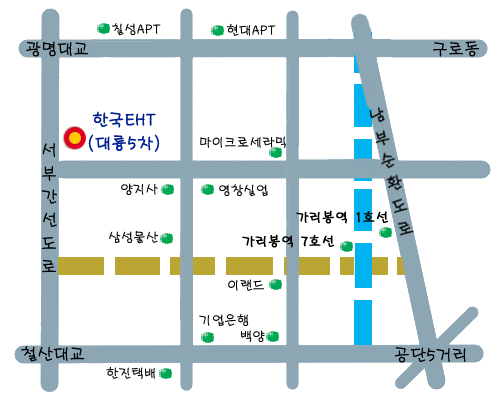
<style>
.page{position:relative;width:500px;height:400px;background:#ffffff}
.page>*{position:absolute;margin:0}
.t1{font:14px "MDGaesung";color:#000000;scale:0.95 1}
.t2{font:18px "MDGaesung";color:#000000;scale:0.95 1}
.t3{font:18px/11.7px "MDGaesung";color:#000000;scale:0.95 1}
.t4{font:14px "MDGaesung";color:#000000;font-weight:bold;scale:0.95 1}
</style>
<div class="page">
<p class="t1" style="left:111px;top:23px;width:50px;height:13px">칠성APT</p>
<p class="t1" style="left:227px;top:23px;width:49px;height:13px">현대APT</p>
<p class="t2" style="left:26px;top:41px;width:63px;height:16px">광명대교</p>
<p class="t2" style="left:433px;top:41px;width:47px;height:16px">구로동</p>
<p class="t1" style="left:200px;top:136px;width:86px;height:12px">마이크로세라믹</p>
<p class="t3" style="left:41px;top:143px;width:16px;height:130px;text-align:center">서<br><br>부<br><br>간<br><br>선<br><br>도<br><br>로</p>
<p class="t1" style="left:121px;top:183px;width:37px;height:12px">양지사</p>
<p class="t1" style="left:219px;top:184px;width:49px;height:13px">영창실업</p>
<p class="t4" style="left:296px;top:210px;width:92px;height:14px">가리봉역 1호선</p>
<p class="t1" style="left:109px;top:231px;width:49px;height:13px">삼성물산</p>
<p class="t4" style="left:242px;top:234px;width:92px;height:14px">가리봉역 7호선</p>
<p class="t1" style="left:228px;top:279px;width:36px;height:12px">이랜드</p>
<p class="t1" style="left:199px;top:313px;width:50px;height:13px">기업은행</p>
<p class="t1" style="left:241px;top:330px;width:24px;height:12px">백양</p>
<p class="t2" style="left:21px;top:346px;width:64px;height:16px">철산대교</p>
<p class="t2" style="left:394px;top:347px;width:72px;height:16px">공단5거리</p>
<p class="t1" style="left:106px;top:367px;width:49px;height:12px">한진택배</p>
</div>
